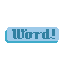
<style>
.page{position:relative;width:64px;height:64px;background:#ffffff}
.page>*{position:absolute;margin:0}
.t1{font:14px "Superscript";color:#3281a2}
</style>
<div class="page">
<p class="t1" style="left:12px;top:29px;width:43px;height:10px">Word!</p>
</div>
